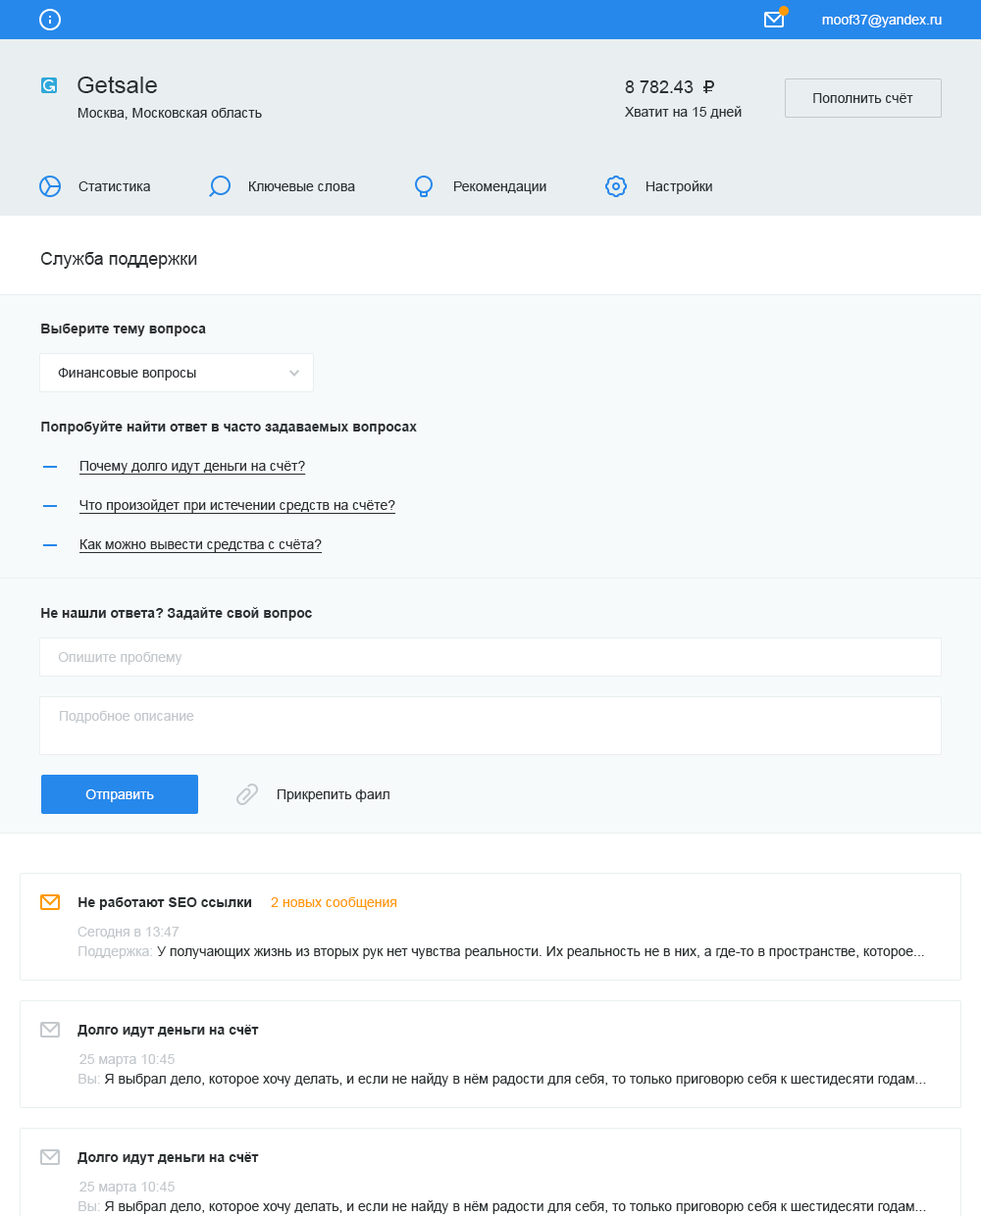
<style>
.page{position:relative;width:981px;height:1216px;background:#ffffff}
.page>*{position:absolute;margin:0}
.t1{font:13.7px "ArialMT";color:#ffffff}
.t2{font:23.5px "ArialMT";color:#2c3133}
.t3{font:17.7px "ArialMT";color:#2c3133}
.t4{font:13.7px "ArialMT";color:#2c3133}
.t5{font:13.7px "Arial-BoldMT";color:#2c3133}
.t6{font:13.7px/39.2px "ArialMT";color:#2c3133;text-decoration:underline}
.t7{font:13.7px "ArialMT";color:#c3c8cc}
.t8{font:13.7px "ArialMT";color:#ff9900}
</style>
<div class="page">
<p class="t1" style="left:822px;top:15px;width:119px;height:12px">moof37@yandex.ru</p>
<p class="t2" style="left:77px;top:76px;width:80px;height:17px">Getsale</p>
<p class="t3" style="left:625px;top:80px;width:68px;height:13px">8 782.43</p>
<p class="t4" style="left:813px;top:93px;width:100px;height:10px">Пополнить счёт</p>
<p class="t4" style="left:77px;top:108px;width:185px;height:12px">Москва, Московская область</p>
<p class="t4" style="left:625px;top:106px;width:116px;height:13px">Хватит на 15 дней</p>
<p class="t4" style="left:78px;top:181px;width:72px;height:10px">Статистика</p>
<p class="t4" style="left:249px;top:181px;width:106px;height:10px">Ключевые слова</p>
<p class="t4" style="left:454px;top:181px;width:92px;height:13px">Рекомендации</p>
<p class="t4" style="left:646px;top:180px;width:66px;height:14px">Настройки</p>
<p class="t3" style="left:40px;top:252px;width:157px;height:17px">Служба поддержки</p>
<p class="t5" style="left:41px;top:324px;width:165px;height:12px">Выберите тему вопроса</p>
<p class="t4" style="left:58px;top:368px;width:138px;height:12px">Финансовые вопросы</p>
<p class="t5" style="left:41px;top:421px;width:376px;height:13px">Попробуйте найти ответ в часто задаваемых вопросах</p>
<p class="t6" style="left:79px;top:461px;width:317px;height:92px">Почему долго идут деньги на счёт?<br>Что произойдет при истечении средств на счёте?<br>Как можно вывести средства с счёта?</p>
<p class="t5" style="left:41px;top:607px;width:271px;height:14px">Не нашли ответа? Задайте свой вопрос</p>
<p class="t7" style="left:58px;top:652px;width:124px;height:13px">Опишите проблему</p>
<p class="t7" style="left:60px;top:711px;width:134px;height:13px">Подробное описание</p>
<p class="t1" style="left:85px;top:789px;width:69px;height:13px">Отправить</p>
<p class="t4" style="left:278px;top:789px;width:111px;height:13px">Прикрепить фаил</p>
<p class="t5" style="left:78px;top:897px;width:174px;height:13px">Не работают SEO ссылки</p>
<p class="t8" style="left:271px;top:897px;width:126px;height:13px">2 новых сообщения</p>
<p class="t7" style="left:77px;top:927px;width:102px;height:11px">Сегодня в 13:47</p>
<p class="t4" style="left:78px;top:946px;width:846px;height:13px"><span class="t7">Поддержка:</span> У получающих жизнь из вторых рук нет чувства реальности. Их реальность не в них, а где-то в пространстве, которое...</p>
<p class="t5" style="left:77px;top:1025px;width:182px;height:13px">Долго идут деньги на счёт</p>
<p class="t7" style="left:79px;top:1054px;width:96px;height:13px">25 марта 10:45</p>
<p class="t4" style="left:78px;top:1073px;width:848px;height:14px"><span class="t7">Вы:</span> Я выбрал дело, которое хочу делать, и если не найду в нём радости для себя, то только приговорю себя к шестидесяти годам...</p>
<p class="t5" style="left:77px;top:1152px;width:182px;height:13px">Долго идут деньги на счёт</p>
<p class="t7" style="left:79px;top:1182px;width:96px;height:12px">25 марта 10:45</p>
<p class="t4" style="left:78px;top:1200px;width:848px;height:14px"><span class="t7">Вы:</span> Я выбрал дело, которое хочу делать, и если не найду в нём радости для себя, то только приговорю себя к шестидесяти годам...</p>
</div>
